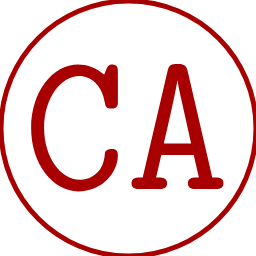
<style>
.page{position:relative;width:256px;height:256px;background:#ffffff}
.page>*{position:absolute;margin:0}
.t1{font:200px "LMMono12-Regular";color:#a80000}
</style>
<div class="page">
<p class="t1" style="left:31px;top:64px;width:193px;height:128px">CA</p>
</div>
